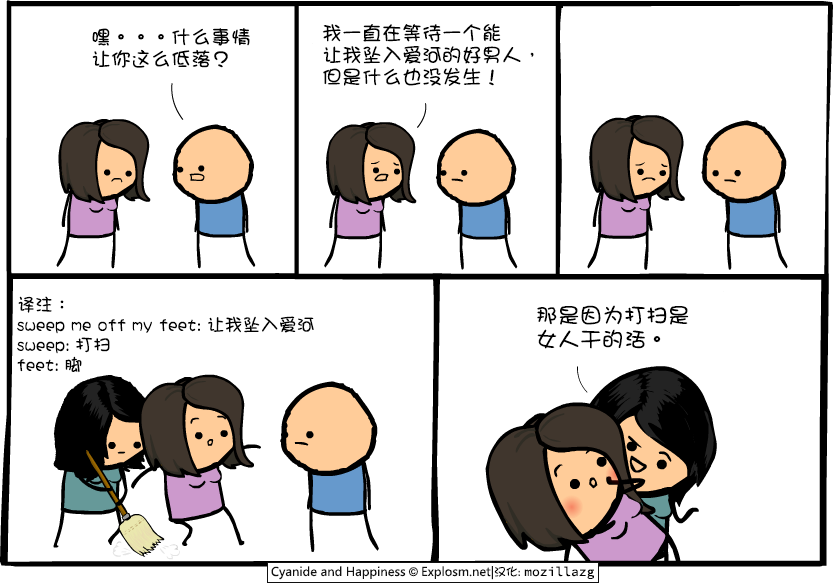
<style>
.page{position:relative;width:835px;height:585px;background:#ffffff}
.page>*{position:absolute;margin:0}
.t1{font:20px/22px "DFGirl";color:#000000}
.t2{font:18px/20px "DFGirl";color:#000000}
.t3{font:22px/24px "DFGirl";color:#000000}
</style>
<div class="page">
<p class="t1" style="left:92px;top:28px;width:158px;height:40px">嘿。。。什么事情<br>让你这么低落？</p>
<p class="t1" style="left:322px;top:23px;width:212px;height:63px">我一直在等待一个能<br>让我坠入爱河的好男人，<br>但是什么也没发生！</p>
<p class="t2" style="left:17px;top:296px;width:297px;height:77px">译注：<br>sweep me off my feet: 让我坠入爱河<br>sweep: 打扫<br>feet: 脚</p>
<p class="t3" style="left:537px;top:305px;width:152px;height:44px">那是因为打扫是<br>女人干的活。</p>
</div>
